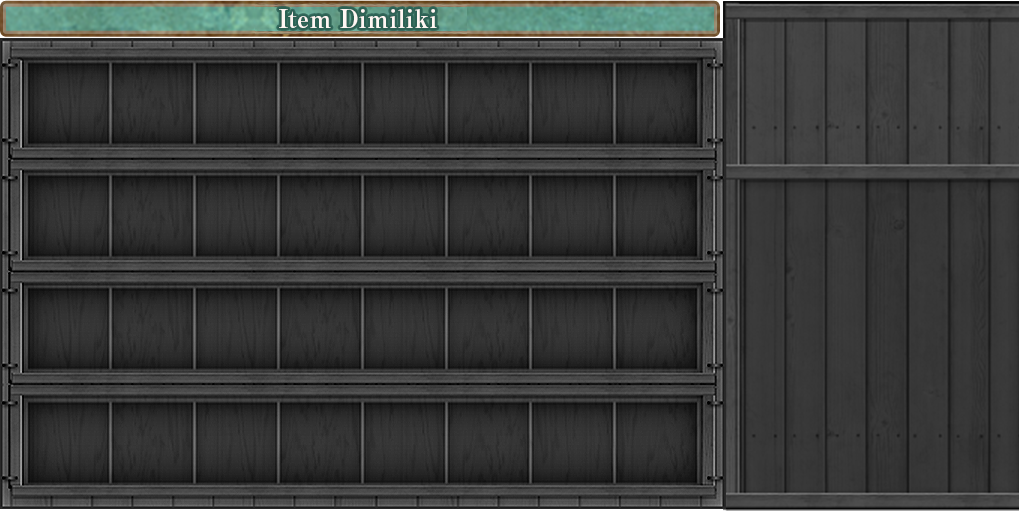
<style>
.page{position:relative;width:1019px;height:511px}
.page>*{position:absolute;margin:0}
.t1{font:25px "RyuminPro-ExBold";color:#fff6f3}
</style>
<div class="page">
<p class="t1" style="left:279px;top:9px;width:158px;height:19px">Item Dimiliki</p>
</div>
